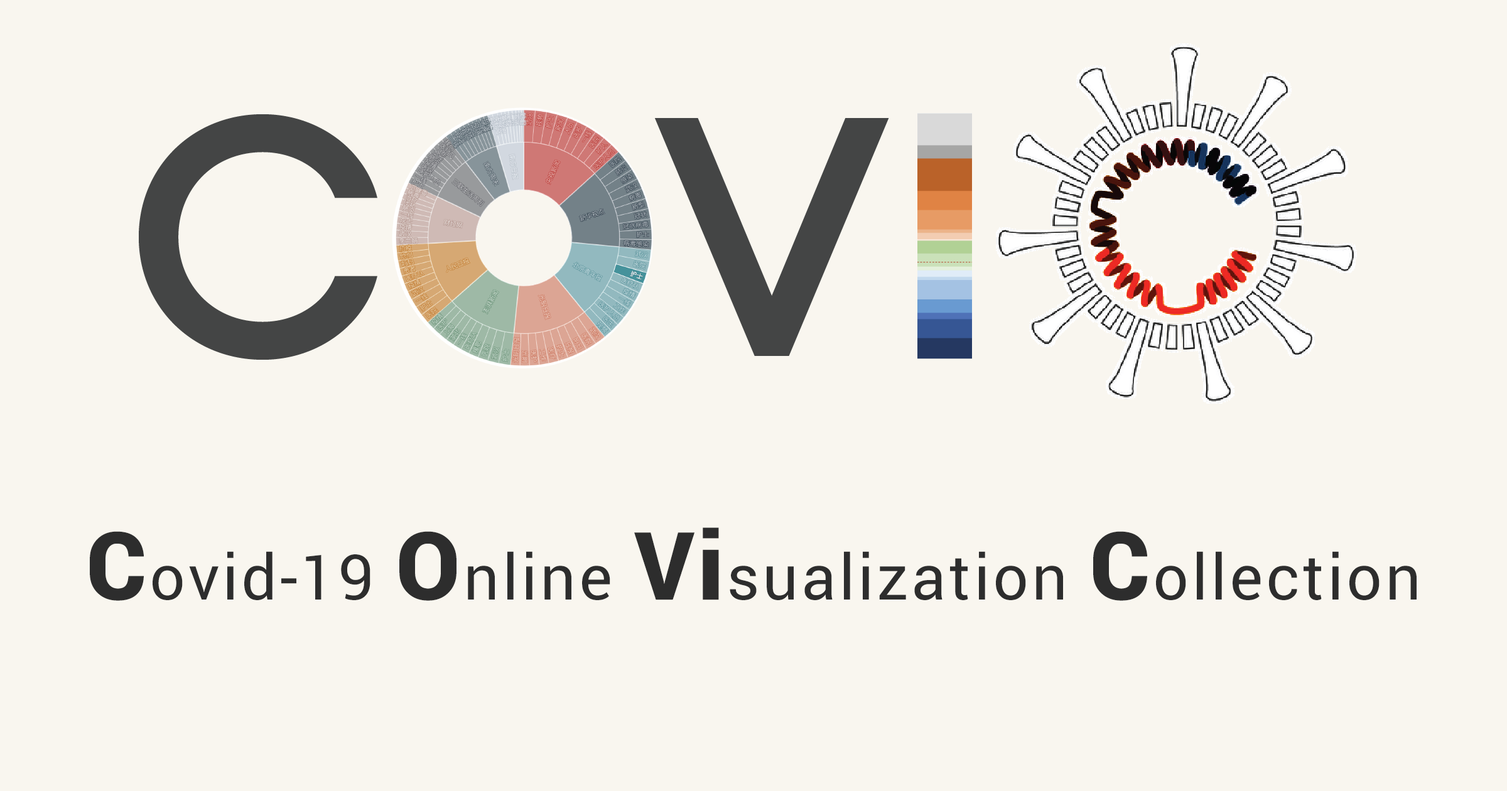
<style>
.page{position:relative;width:1507px;height:791px;background:#f9f6ef}
.page>*{position:absolute;margin:0}
.t1{font:62.8px "Roboto-Regular";letter-spacing:0.05em;color:#2d2d2d}
.t2{font:94.2px "Roboto-Black";letter-spacing:0.05em;color:#2d2d2d}
</style>
<div class="page">
<p class="t1" style="left:90px;top:527px;width:1327px;height:74px"><span class="t2">C</span>ovid-19 <span class="t2">O</span>nline <span class="t2">Vi</span>sualization <span class="t2">C</span>ollection</p>
</div>
